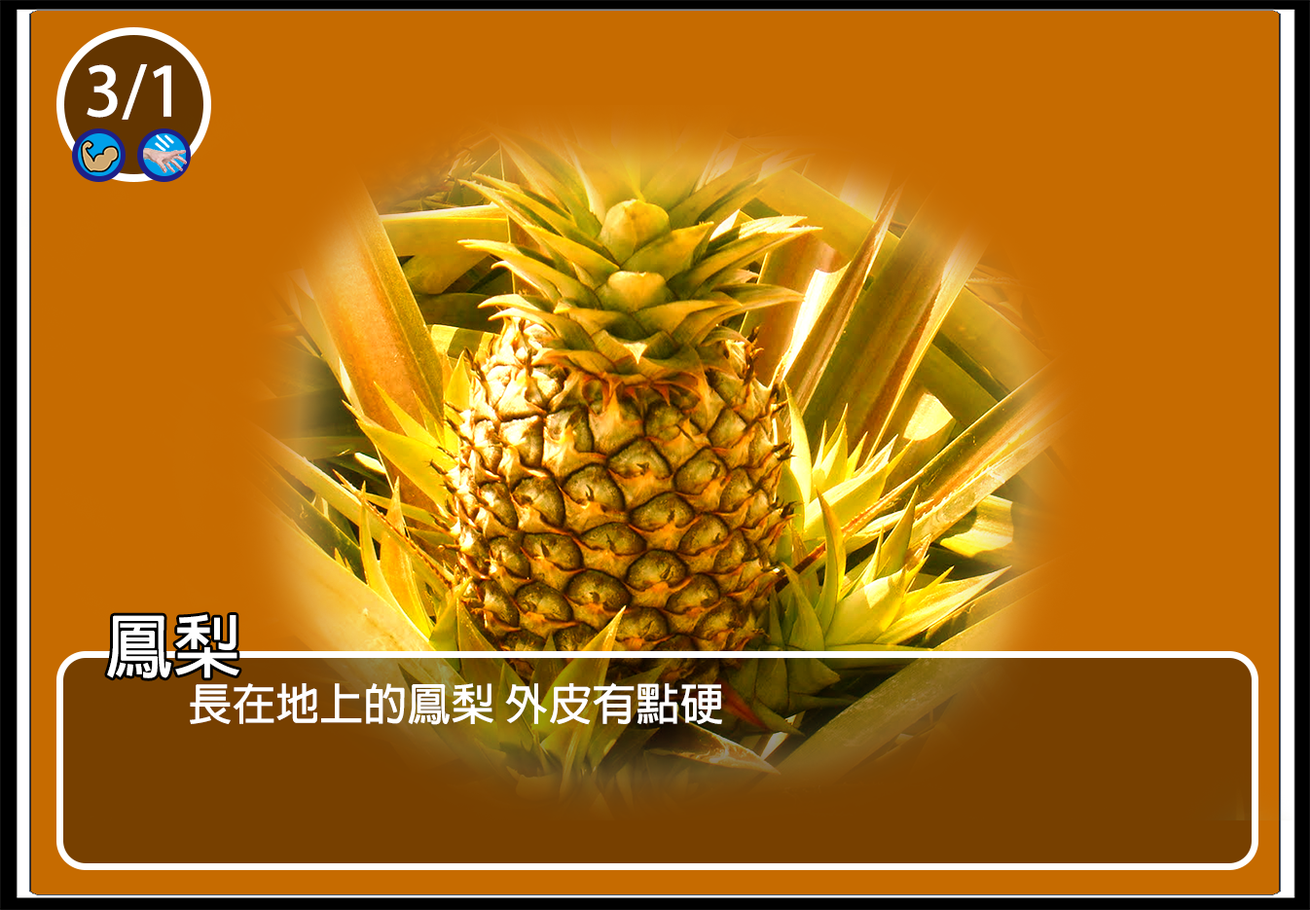
<style>
.page{position:relative;width:1310px;height:910px;background:#c66b00}
.page>*{position:absolute;margin:0}
.t1{font:66.9px "AdobeFanHeitiStd-Bold";color:#ffffff}
.t2{font:68.1px "AdobeFanHeitiStd-Bold";color:#ffffff}
.t3{font:43.8px "AdobeFanHeitiStd-Bold";color:#ffffff}
</style>
<div class="page">
<p class="t1" style="left:87px;top:64px;width:84px;height:56px">3/1</p>
<p class="t2" style="left:107px;top:614px;width:132px;height:64px">鳳梨</p>
<p class="t3" style="left:190px;top:682px;width:532px;height:43px">長在地上的鳳梨 外皮有點硬</p>
</div>
